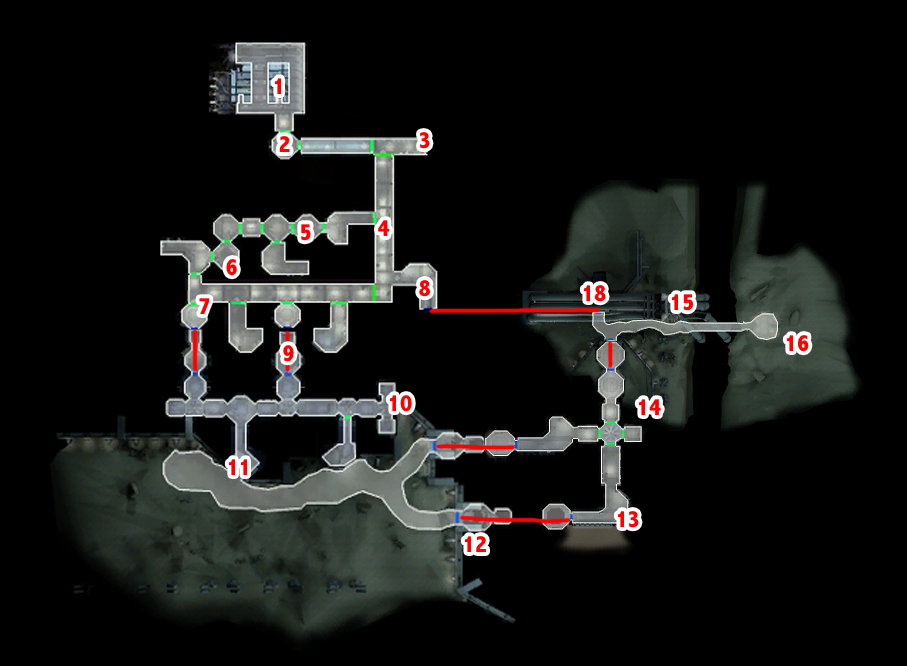
<style>
.page{position:relative;width:907px;height:666px;background:#000000}
.page>*{position:absolute;margin:0}
.t1{font:24px "AbadiMT-CondensedExtraBold";color:#ff0000}
</style>
<div class="page">
<p class="t1" style="left:274px;top:78px;width:7px;height:16px">1</p>
<p class="t1" style="left:279px;top:136px;width:11px;height:16px">2</p>
<p class="t1" style="left:420px;top:132px;width:10px;height:17px">3</p>
<p class="t1" style="left:378px;top:220px;width:12px;height:16px">4</p>
<p class="t1" style="left:301px;top:224px;width:10px;height:17px">5</p>
<p class="t1" style="left:226px;top:259px;width:11px;height:17px">6</p>
<p class="t1" style="left:419px;top:280px;width:11px;height:17px">8</p>
<p class="t1" style="left:583px;top:285px;width:23px;height:17px">18</p>
<p class="t1" style="left:671px;top:294px;width:22px;height:17px">15</p>
<p class="t1" style="left:199px;top:298px;width:11px;height:16px">7</p>
<p class="t1" style="left:786px;top:335px;width:23px;height:17px">16</p>
<p class="t1" style="left:283px;top:345px;width:11px;height:17px">9</p>
<p class="t1" style="left:389px;top:395px;width:23px;height:17px">10</p>
<p class="t1" style="left:638px;top:399px;width:23px;height:16px">14</p>
<p class="t1" style="left:228px;top:459px;width:19px;height:16px">11</p>
<p class="t1" style="left:617px;top:511px;width:22px;height:17px">13</p>
<p class="t1" style="left:464px;top:536px;width:22px;height:16px">12</p>
</div>
